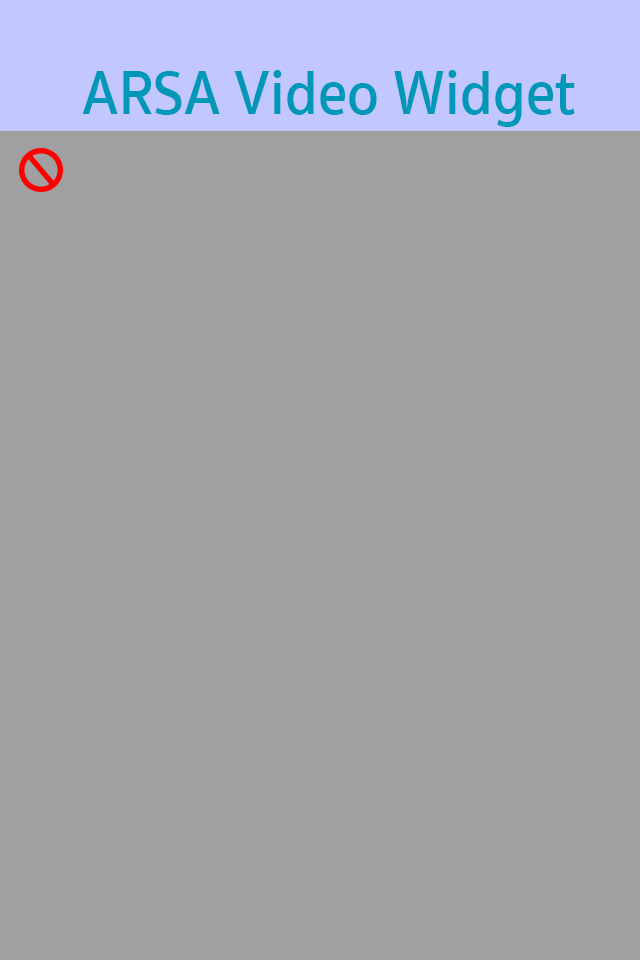
<style>
.page{position:relative;width:640px;height:960px;background:#a0a0a0}
.page>*{position:absolute;margin:0}
.t1{font:63.8px "SukhumvitSet-SemiBold";color:#0097b8;scale:0.91 1}
</style>
<div class="page">
<p class="t1" style="left:82px;top:70px;width:493px;height:57px">ARSA Video Widget</p>
</div>
